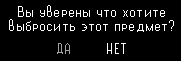
<style>
.page{position:relative;width:181px;height:61px;background:#000000}
.page>*{position:absolute;margin:0}
.t1{font:14.2px "agat-8";color:#ffffff;scale:0.89 1}
.t2{font:14.2px "agat-8";color:#a2a2a2;scale:0.89 1}
</style>
<div class="page">
<p class="t1" style="left:18px;top:5px;width:147px;height:12px">Вы  уверены  что  хотите</p>
<p class="t1" style="left:9px;top:19px;width:165px;height:13px">выбросить  этот  предмет?</p>
<p class="t2" style="left:57px;top:43px;width:13px;height:11px">ДА</p>
<p class="t1" style="left:107px;top:43px;width:19px;height:11px;opacity:0.5">НЕТ</p>
<p class="t1" style="left:107px;top:43px;width:19px;height:11px">НЕТ</p>
</div>
